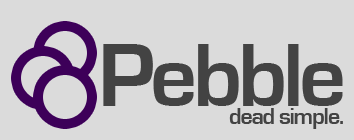
<style>
.page{position:relative;width:354px;height:140px;background:#dbdbdb}
.page>*{position:absolute;margin:0}
.t1{font:93.4px "EurostileBold";letter-spacing:-0.05em;color:#434343}
.t2{font:24px "EurostileBold";letter-spacing:-0.05em;color:#434343}
</style>
<div class="page">
<p class="t1" style="left:103px;top:44px;width:240px;height:62px">Pebble</p>
<p class="t2" style="left:229px;top:108px;width:114px;height:21px">dead simple.</p>
</div>
